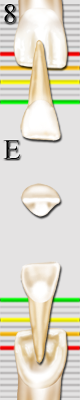
<style>
.page{position:relative;width:80px;height:400px;background:#e4e3e3}
.page>*{position:absolute;margin:0}
.t1{font:28.4px "TimesNewRomanPSMT";letter-spacing:0.005em;color:#000000}
.t2{font:28.4px "TimesNewRomanPSMT";letter-spacing:0.005em}
</style>
<div class="page">
<p class="t1" style="left:4px;top:4px;width:12px;height:20px">8</p>
<p class="t2" style="left:3px;top:140px;width:18px;height:19px">E</p>
</div>
